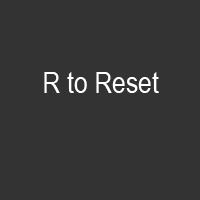
<style>
.page{position:relative;width:200px;height:200px;background:#333333}
.page>*{position:absolute;margin:0}
.t1{font:30px "ArialNarrow";color:#ffffff}
</style>
<div class="page">
<p class="t1" style="left:44px;top:72px;width:115px;height:21px">R to Reset</p>
</div>
